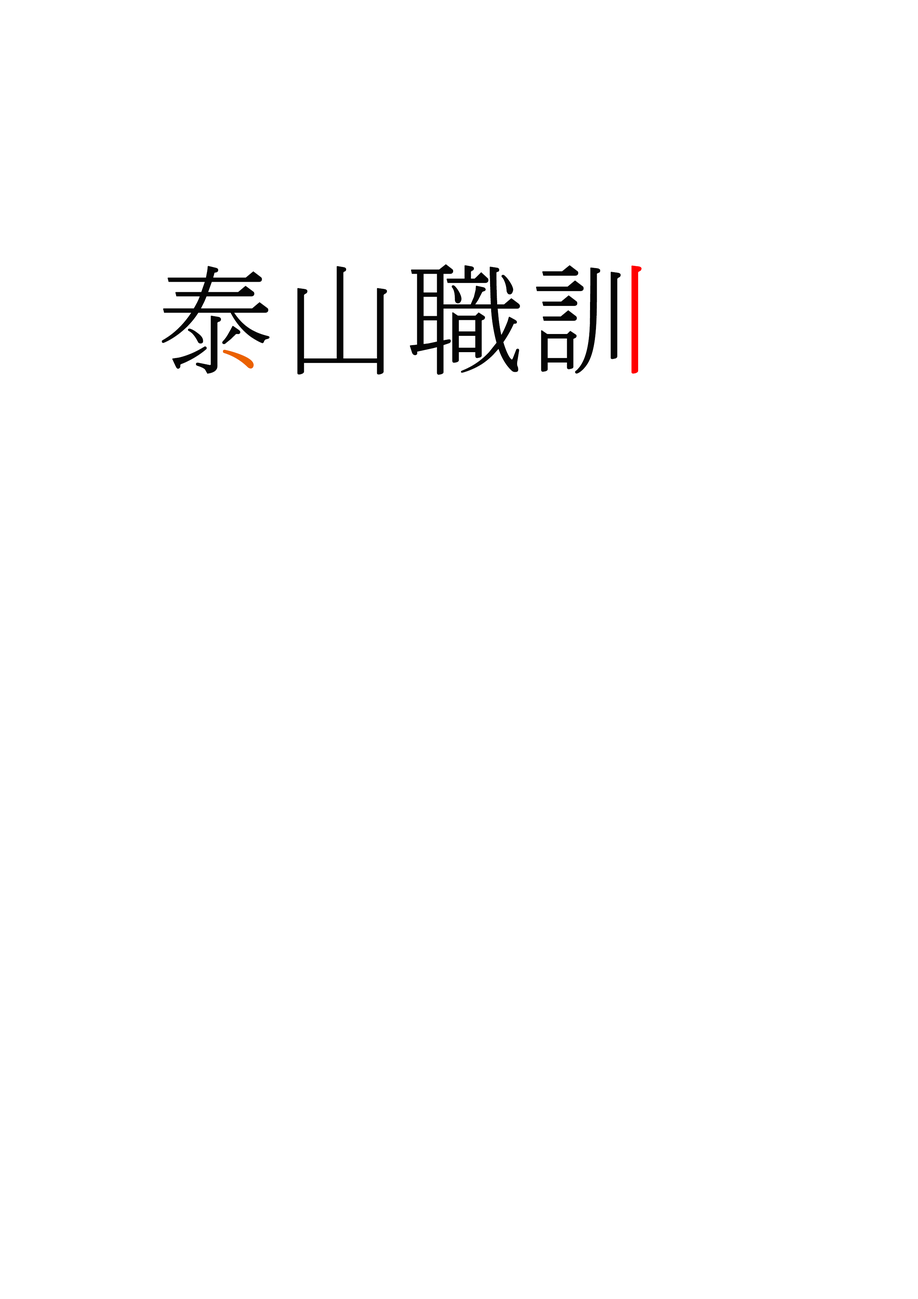
<style>
.page{position:relative;width:918px;height:1299px;background:#ffffff}
.page>*{position:absolute;margin:0}
.t1{font:115.7px "AdobeMingStd-Light";letter-spacing:0.05em;color:#050505;font-weight:bold}
</style>
<div class="page">
<p class="t1" style="left:162px;top:264px;width:480px;height:111px">泰山職訓</p>
</div>
